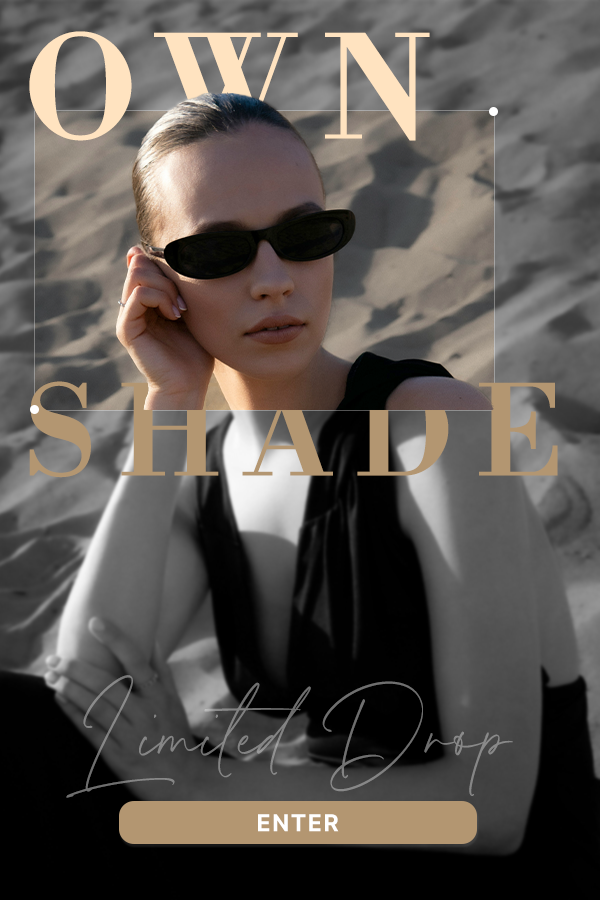
<style>
.page{position:relative;width:600px;height:900px}
.page>*{position:absolute;margin:0}
.t1{font:140px "LibreBodoni-SemiBold";letter-spacing:0.2em;color:#ffe3c0;text-transform:uppercase}
.t2{font:122.7px "LibreBodoni-SemiBold";letter-spacing:0.2em;color:#b39671;text-transform:uppercase}
.t3{font:139.1px "KristianParadise";color:#828282}
.t4{font:24px "Pretendard-Bold";letter-spacing:0.05em;color:#ffffff;text-transform:uppercase}
</style>
<div class="page">
<p class="t1" style="left:29px;top:31px;width:401px;height:110px">own</p>
<p class="t2" style="left:29px;top:381px;width:529px;height:97px">shade</p>
<p class="t3" style="left:66px;top:675px;width:447px;height:123px">Limited Drop</p>
<p class="t4" style="left:258px;top:814px;width:81px;height:18px">Enter</p>
</div>
